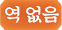
<style>
.page{position:relative;width:62px;height:30px}
.page>*{position:absolute;margin:0}
.t1{font:18.7px "SDKukdetopokki-aLt";letter-spacing:-0.02em;color:#ffffff}
</style>
<div class="page">
<p class="t1" style="left:5px;top:5px;width:54px;height:18px">역 없음</p>
</div>
